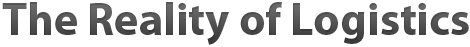
<style>
.page{position:relative;width:470px;height:47px;background:#ffffff}
.page>*{position:absolute;margin:0}
.t1{font:46px "MyriadPro-Bold";color:#464646}
</style>
<div class="page">
<p class="t1" style="left:2px;top:2px;width:467px;height:43px">The Reality of Logistics</p>
</div>
